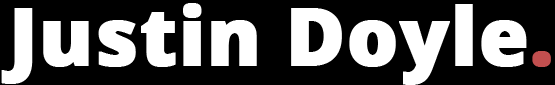
<style>
.page{position:relative;width:555px;height:85px;background:#000000}
.page>*{position:absolute;margin:0}
.t1{font:80px "OpenSans-Extrabold";color:#ffffff;font-weight:bold}
.t2{font:80px "OpenSans-Extrabold";color:#c24f4f;font-weight:bold}
</style>
<div class="page">
<p class="t1" style="left:1px;top:3px;width:550px;height:82px">Justin Doyle<span class="t2">.</span></p>
</div>
